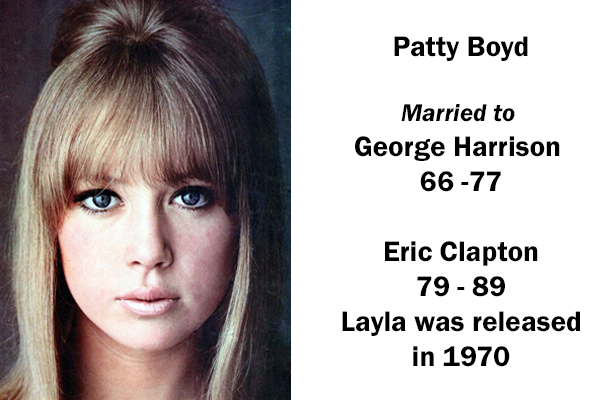
<style>
.page{position:relative;width:600px;height:400px;background:#ffffff}
.page>*{position:absolute;margin:0}
.t1{font:29.2px "FranklinGothic-Demi";color:#000000}
.t2{font:25px "FranklinGothic-DemiItalic";color:#000000}
</style>
<div class="page">
<p class="t1" style="left:342px;top:36px;width:238px;height:331px;text-align:center">Patty Boyd<br><br><span class="t2">Married to <br></span>George Harrison <br>66 -77<br><br>Eric Clapton<br>79 - 89<br>Layla was released<br>in 1970</p>
</div>
